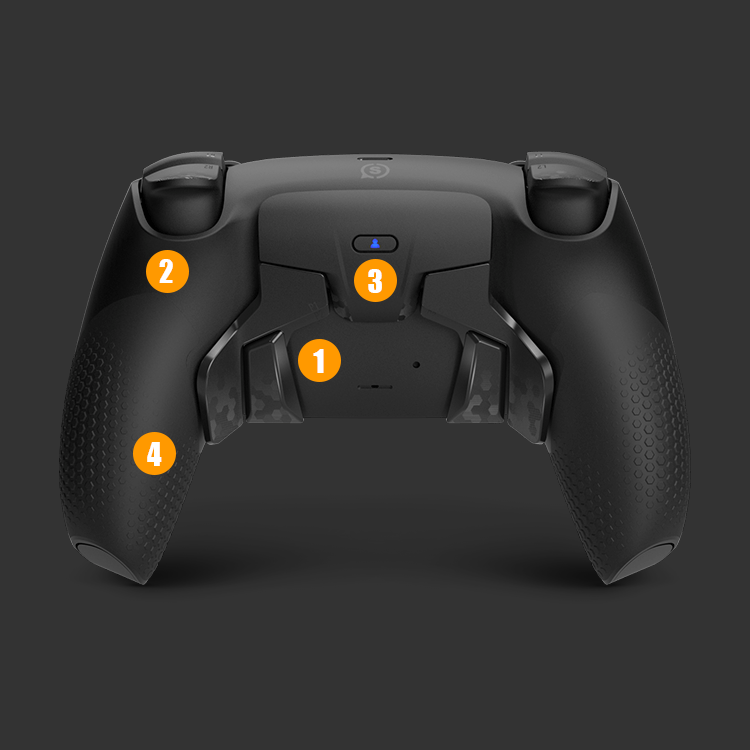
<style>
.page{position:relative;width:750px;height:750px;background:#333333}
.page>*{position:absolute;margin:0}
.t1{font:30px "Impact";letter-spacing:0.075em;color:#ffffff;text-transform:uppercase}
</style>
<div class="page">
<p class="t1" style="left:159px;top:259px;width:14px;height:24px">2</p>
<p class="t1" style="left:368px;top:269px;width:14px;height:24px">3</p>
<p class="t1" style="left:313px;top:349px;width:11px;height:24px">1</p>
<p class="t1" style="left:147px;top:442px;width:15px;height:24px">4</p>
</div>
